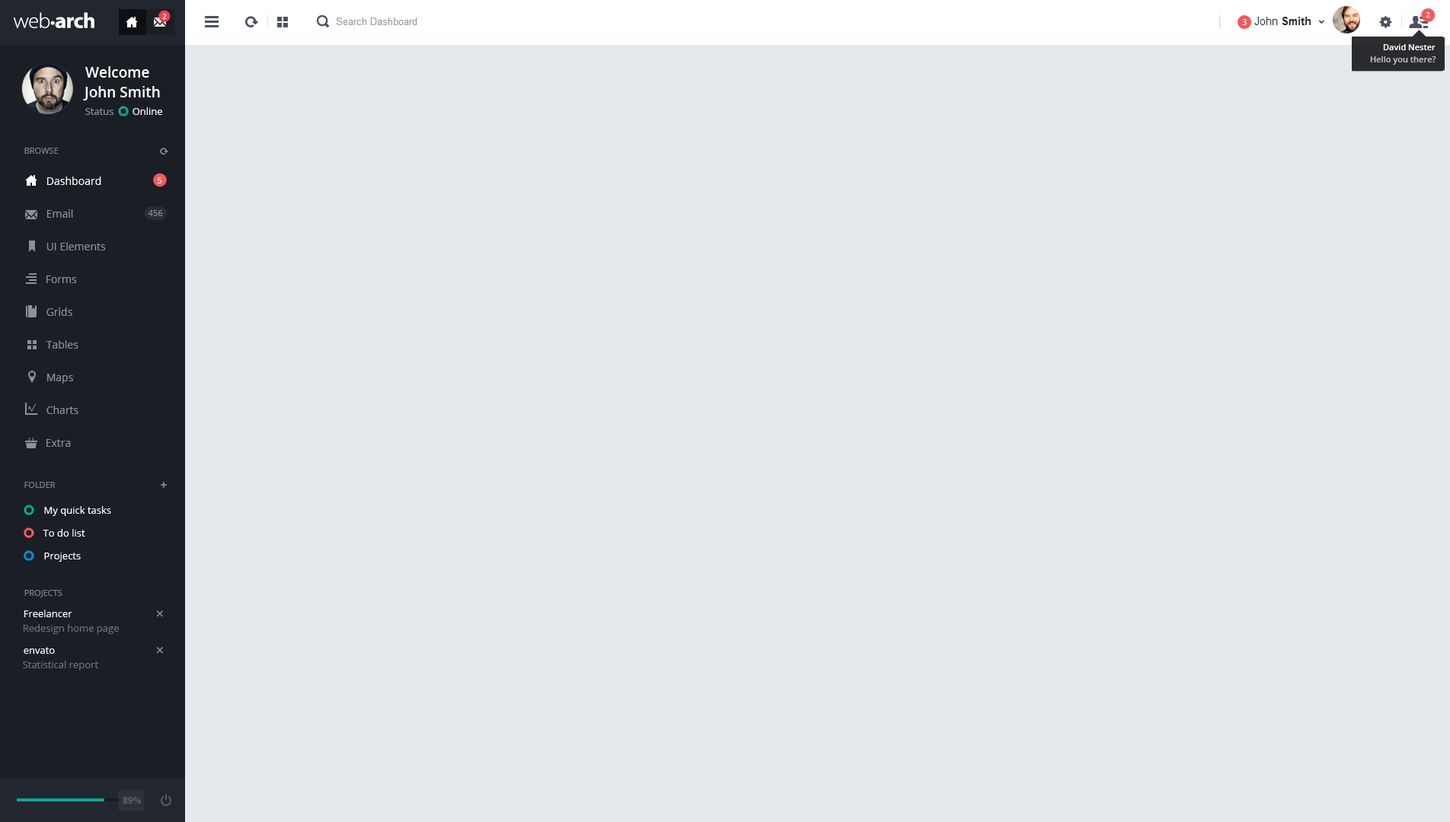
<style>
.page{position:relative;width:1450px;height:822px;background:#e5e9ec}
.page>*{position:absolute;margin:0}
.t1{font:6.9px "OpenSans-Bold";color:#ffffff}
.t2{font:7.6px "OpenSans-Semibold";color:#ffffff}
.t3{font:8.4px "OpenSans-Semibold";color:#ffffff}
.t4{font:8.4px "OpenSans-Semibold";color:#bfc0c1}
.t5{font:14.5px "OpenSans-Semibold";color:#ffffff}
.t6{font:9.9px "OpenSans";color:#8b91a0}
.t7{font:9.9px "OpenSans";color:#ffffff}
.t8{font:8.4px "OpenSans";color:#828387}
.t9{font:10.7px "OpenSans";color:#ffffff}
.t10{font:8.4px "OpenSans";color:#ffffff}
.t11{font:10.7px "OpenSans";color:#8b91a0}
.t12{font:8.4px "OpenSans";color:#8b91a0}
.t13{font:9.9px "OpenSans";color:#6d6f73}
.t14{font:9.1px "Arial-BoldMT";color:#5e646d}
</style>
<div class="page">
<p class="t1" style="left:162px;top:14px;width:5px;height:5px">2</p>
<p class="t2" style="left:1426px;top:12px;width:4px;height:6px">2</p>
<p class="t3" style="left:1383px;top:44px;width:52px;height:6px">David Nester</p>
<p class="t4" style="left:1370px;top:56px;width:66px;height:9px">Hello you there?</p>
<p class="t5" style="left:85px;top:66px;width:64px;height:12px">Welcome</p>
<p class="t5" style="left:83px;top:86px;width:77px;height:15px">John Smith</p>
<p class="t6" style="left:85px;top:108px;width:28px;height:7px">Status</p>
<p class="t7" style="left:133px;top:107px;width:29px;height:8px">Online</p>
<p class="t8" style="left:24px;top:148px;width:35px;height:6px">BROWSE</p>
<p class="t9" style="left:47px;top:177px;width:54px;height:8px">Dashboard</p>
<p class="t10" style="left:158px;top:177px;width:4px;height:7px">5</p>
<p class="t11" style="left:47px;top:209px;width:26px;height:9px">Email</p>
<p class="t12" style="left:148px;top:210px;width:15px;height:6px">456</p>
<p class="t11" style="left:46px;top:242px;width:60px;height:9px">UI Elements</p>
<p class="t11" style="left:46px;top:276px;width:31px;height:7px">Forms</p>
<p class="t11" style="left:46px;top:308px;width:26px;height:8px">Grids</p>
<p class="t11" style="left:46px;top:340px;width:32px;height:9px">Tables</p>
<p class="t11" style="left:47px;top:374px;width:26px;height:10px">Maps</p>
<p class="t11" style="left:46px;top:406px;width:32px;height:8px">Charts</p>
<p class="t11" style="left:46px;top:439px;width:25px;height:8px">Extra</p>
<p class="t8" style="left:24px;top:482px;width:32px;height:6px">FOLDER</p>
<p class="t7" style="left:44px;top:506px;width:67px;height:10px">My quick tasks</p>
<p class="t7" style="left:43px;top:529px;width:42px;height:8px">To do list</p>
<p class="t7" style="left:44px;top:553px;width:37px;height:9px">Projects</p>
<p class="t8" style="left:24px;top:590px;width:38px;height:8px">PROJECTS</p>
<p class="t7" style="left:24px;top:610px;width:48px;height:8px">Freelancer</p>
<p class="t13" style="left:23px;top:624px;width:96px;height:10px">Redesign home page</p>
<p class="t7" style="left:24px;top:647px;width:31px;height:7px">envato</p>
<p class="t13" style="left:23px;top:661px;width:75px;height:10px">Statistical report</p>
<p class="t14" style="left:123px;top:797px;width:18px;height:7px">89%</p>
</div>
